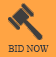
<style>
.page{position:relative;width:56px;height:57px;background:#ffa444}
.page>*{position:absolute;margin:0}
.t1{font:8.8px "TimesNewRomanPSMT";color:#3e3e3e;text-transform:uppercase}
</style>
<div class="page">
<p class="t1" style="left:8px;top:45px;width:41px;height:7px">BId NOW</p>
</div>
